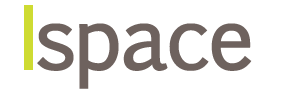
<style>
.page{position:relative;width:290px;height:90px;background:#ffffff}
.page>*{position:absolute;margin:0}
.t1{font:83.3px "EuphemiaCAS";letter-spacing:-0.05em;color:#6b625e;font-weight:bold}
</style>
<div class="page">
<p class="t1" style="left:37px;top:23px;width:215px;height:66px">space</p>
</div>
